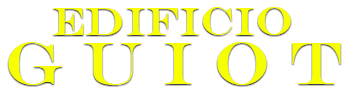
<style>
.page{position:relative;width:350px;height:90px;background:#ffffff}
.page>*{position:absolute;margin:0}
.t1{font:40px "EngraversMT";color:#f7ff03}
.t2{font:60px "EngraversMT";color:#f7ff03}
</style>
<div class="page">
<p class="t1" style="left:53px;top:7px;width:238px;height:28px">EDIFICIO</p>
<p class="t2" style="left:8px;top:42px;width:333px;height:43px">G U I O T</p>
</div>
